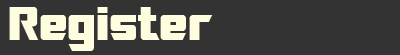
<style>
.page{position:relative;width:400px;height:55px;background:#333333}
.page>*{position:absolute;margin:0}
.t1{font:55px "SFTransRobotics";color:#fffde0}
</style>
<div class="page">
<p class="t1" style="left:9px;top:7px;width:204px;height:44px">Register</p>
</div>
